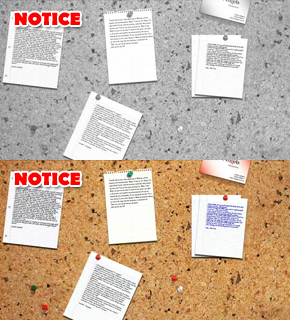
<style>
.page{position:relative;width:290px;height:320px}
.page>*{position:absolute;margin:0}
.t1{font:18px "BerlinSansFB-Bold";color:#ff0000}
</style>
<div class="page">
<p class="t1" style="left:14px;top:12px;width:67px;height:14px">NOTICE</p>
<p class="t1" style="left:14px;top:172px;width:67px;height:14px">NOTICE</p>
</div>
